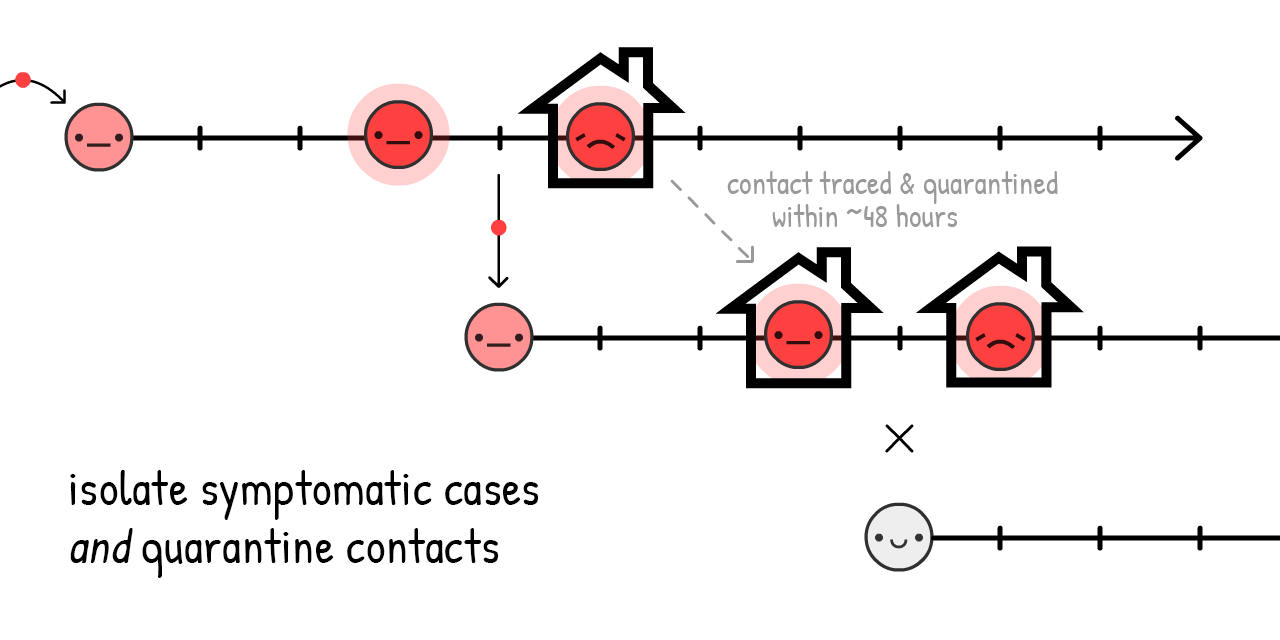
<style>
.page{position:relative;width:1280px;height:640px;background:#ffffff}
.page>*{position:absolute;margin:0}
.t1{font:54px "PatrickHand-Regular";color:#999999}
.t2{font:82px/58px "PatrickHand-Regular";letter-spacing:0.015em;color:#000000}
.t3{font:82px/58px "PatrickHand-Regular";letter-spacing:0.015em;color:#000000;font-style:italic}
</style>
<div class="page">
<p class="t1" style="left:727px;top:171px;width:331px;height:33px">contact traced &amp; quarantined</p>
<p class="t1" style="left:772px;top:204px;width:185px;height:23px">within ~48 hours</p>
<p class="t2" style="left:70px;top:470px;width:469px;height:108px">isolate symptomatic cases<br><span class="t3">and</span> quarantine contacts</p>
</div>
